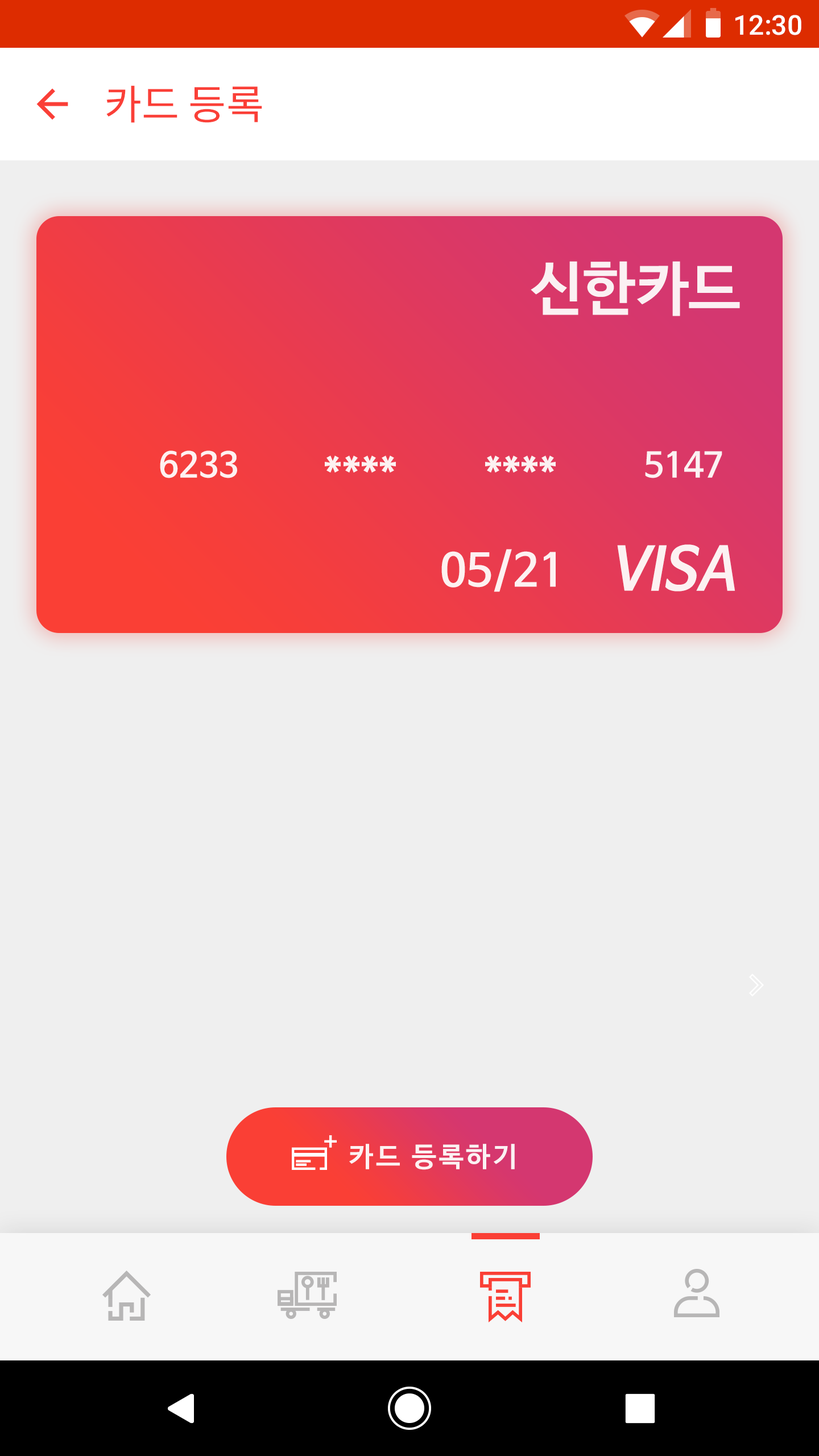
<style>
.page{position:relative;width:819px;height:1456px;background:#efefef}
.page>*{position:absolute;margin:0}
.t1{font:27.3px "Roboto-Medium";color:#ffffff}
.t2{font:40.9px "NotoSansCJKkr-Regular";color:#fa3f37}
.t3{font:58.9px "NanumBarunGothicBold";color:#ffffff}
.t4{font:34.1px "NanumBarunGothicBold";color:#ffffff}
.t5{font:40.9px "NanumBarunGothicBold";color:#ffffff}
.t6{font:58.9px "NanumBarunGothicBold";color:#ffffff;font-style:italic}
.t7{font:44.7px "NanumBarunGothicBold";color:#ffffff}
.t8{font:27.3px "NanumBarunGothicBold";letter-spacing:0.1em;color:#ffffff}
</style>
<div class="page">
<p class="t1" style="left:735px;top:15px;width:66px;height:20px">12:30</p>
<p class="t2" style="left:106px;top:85px;width:156px;height:38px">카드 등록</p>
<p class="t3" style="left:531px;top:261px;width:209px;height:55px;opacity:0.9">신한카드</p>
<p class="t4" style="left:160px;top:450px;width:77px;height:28px;opacity:0.9">6233</p>
<p class="t5" style="left:325px;top:456px;width:71px;height:17px;opacity:0.9">****</p>
<p class="t5" style="left:485px;top:456px;width:71px;height:17px;opacity:0.9">****</p>
<p class="t4" style="left:645px;top:451px;width:77px;height:27px;opacity:0.9">5147</p>
<p class="t6" style="left:617px;top:544px;width:118px;height:47px;opacity:0.9">VISA</p>
<p class="t7" style="left:441px;top:549px;width:115px;height:43px;opacity:0.9">05/21</p>
<p class="t8" style="left:349px;top:1144px;width:166px;height:26px;opacity:0.9">카드 등록하기</p>
</div>
